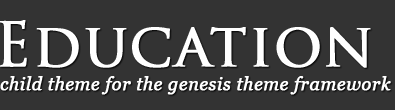
<style>
.page{position:relative;width:395px;height:110px;background:#333333}
.page>*{position:absolute;margin:0}
.t1{font:60px "TrajanPro-Regular";letter-spacing:0.01em;color:#ffffff;font-weight:bold}
.t2{font:18px "Georgia-Italic";letter-spacing:0.01em;color:#ffffff;font-weight:bold}
</style>
<div class="page">
<p class="t1" style="left:0px;top:20px;width:371px;height:48px">Education</p>
<p class="t2" style="left:0px;top:76px;width:391px;height:19px">child theme for the genesis theme framework</p>
</div>
